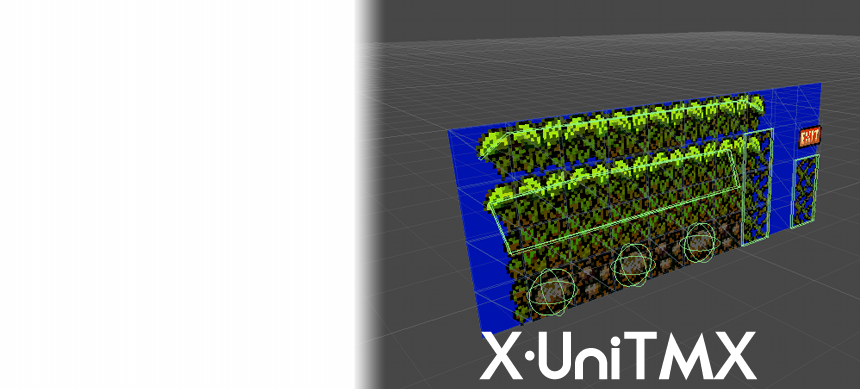
<style>
.page{position:relative;width:860px;height:389px;background:#fefefe}
.page>*{position:absolute;margin:0}
.t1{font:60px "Moderna";color:#ffffff}
</style>
<div class="page">
<p class="t1" style="left:479px;top:331px;width:279px;height:50px">X-UniTMX</p>
</div>
